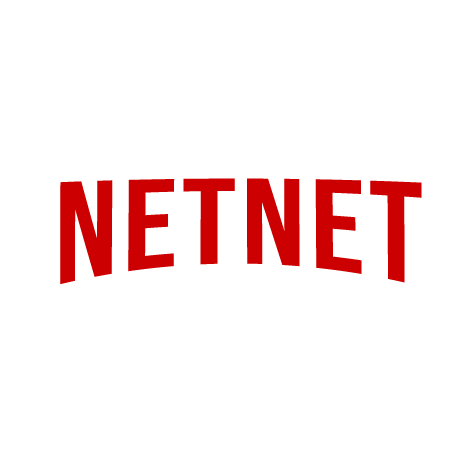
<style>
.page{position:relative;width:472px;height:472px;background:#ffffff}
.page>*{position:absolute;margin:0}
.t1{font:150px "BebasNeue-Regular";letter-spacing:0.03em;color:#cc0000}
.t2{font:52.7px "BebasNeue-Regular";letter-spacing:0.03em;color:#cc0000}
</style>
<div class="page">
<p class="t1" style="left:60px;top:178px;width:362px;height:107px"><span class="t2"> </span>netnet</p>
</div>
